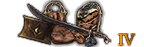
<style>
.page{position:relative;width:144px;height:47px;background:#ffffff}
.page>*{position:absolute;margin:0}
.t1{font:16.7px "MinionVariableConcept-Roman"}
</style>
<div class="page">
<p class="t1" style="left:118px;top:34px;width:17px;height:12px">IV</p>
</div>
